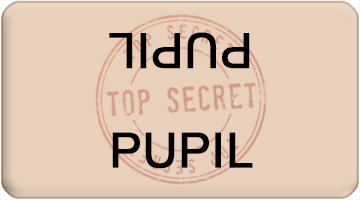
<style>
.page{position:relative;width:360px;height:200px;background:#e8d0bb}
.page>*{position:absolute;margin:0}
.t1{font:48px "ArialMT";color:#000000;font-weight:bold}
</style>
<div class="page">
<p class="t1" style="left:109px;top:32px;width:141px;height:37px;rotate:180deg">PUPIL</p>
<p class="t1" style="left:112px;top:132px;width:141px;height:37px">PUPIL</p>
</div>
